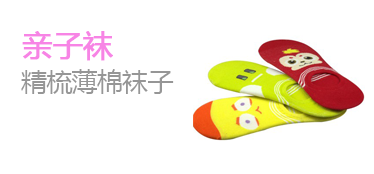
<style>
.page{position:relative;width:374px;height:174px;background:#ffffff}
.page>*{position:absolute;margin:0}
.t1{font:30px "MicrosoftYaHei";letter-spacing:-0.016em;color:#f784e5;text-transform:uppercase;font-weight:bold}
.t2{font:26px "MicrosoftYaHei";letter-spacing:-0.027em;color:#969696;text-transform:uppercase}
</style>
<div class="page">
<p class="t1" style="left:22px;top:31px;width:91px;height:30px">亲子袜</p>
<p class="t2" style="left:21px;top:69px;width:153px;height:25px">精梳薄棉袜子</p>
</div>
